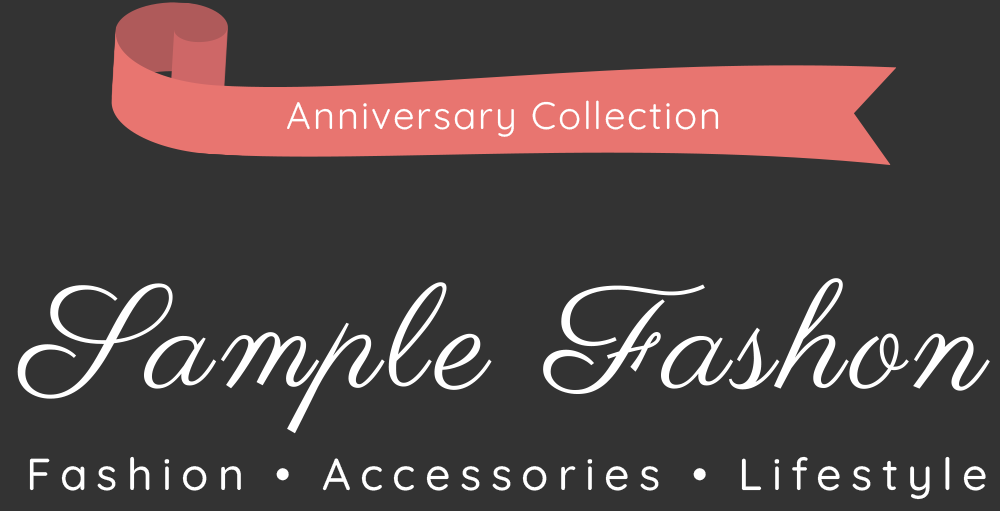
<style>
.page{position:relative;width:1000px;height:511px;background:#333333}
.page>*{position:absolute;margin:0}
.t1{font:38.2px "Quicksand-Regular";letter-spacing:0.05em;color:#ffffff}
.t2{font:146.1px "Parisienne-Regular";letter-spacing:0.05em;color:#ffffff}
.t3{font:44.7px "Quicksand-Medium";letter-spacing:0.21em;color:#ffffff}
</style>
<div class="page">
<p class="t1" style="left:287px;top:100px;width:432px;height:37px">Anniversary Collection</p>
<p class="t2" style="left:17px;top:278px;width:973px;height:156px">Sample Fashon</p>
<p class="t3" style="left:29px;top:456px;width:957px;height:44px">Fashion • Accessories • Lifestyle</p>
</div>
